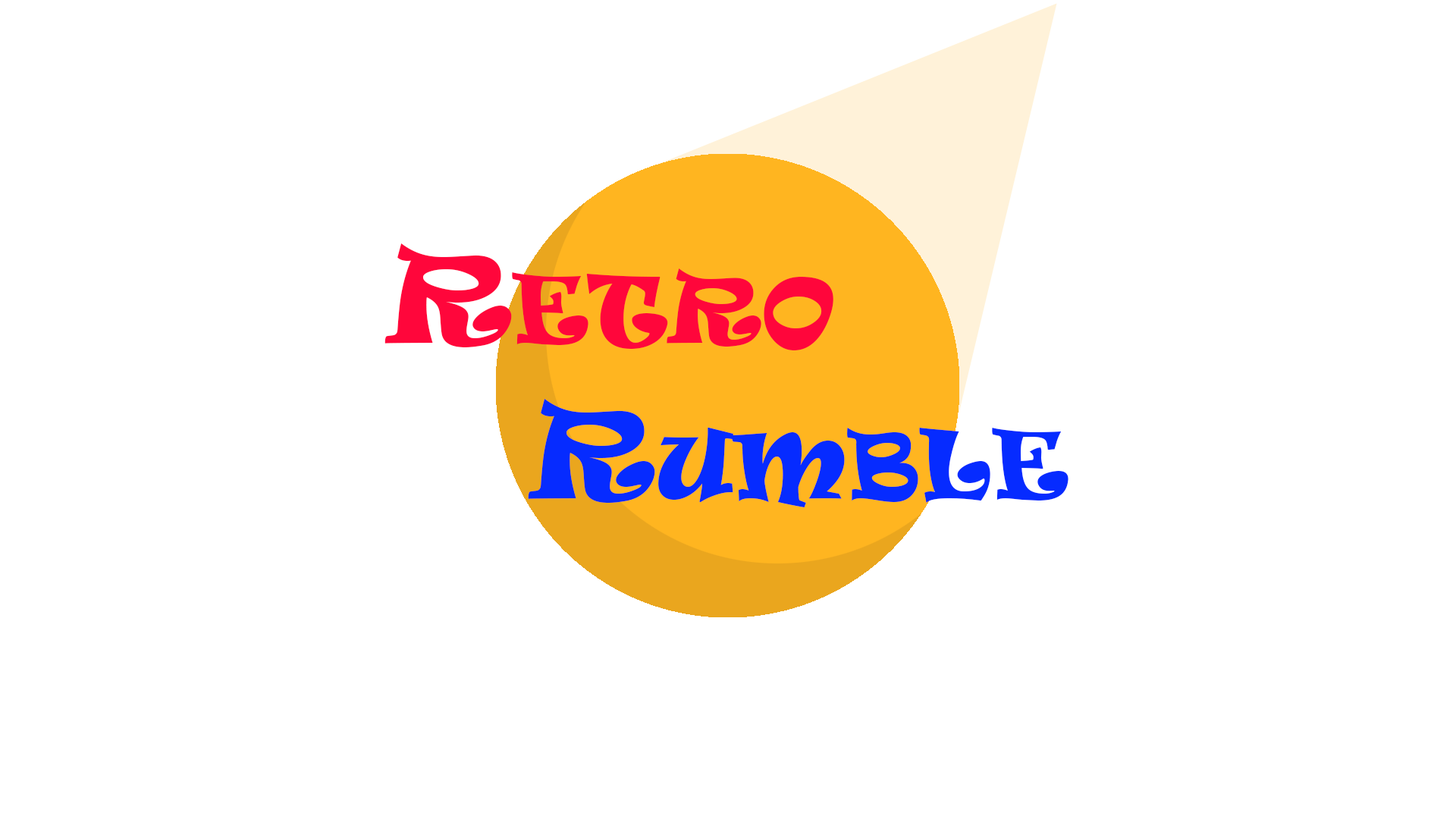
<style>
.page{position:relative;width:1456px;height:819px;background:#ffffff}
.page>*{position:absolute;margin:0}
.t1{font:89.5px "Ravie";color:#ff063b}
.t2{font:119.8px "Ravie";color:#ff063b}
.t3{font:89.5px "Ravie";color:#062bff}
.t4{font:119.8px "Ravie";color:#062bff}
</style>
<div class="page">
<p class="t1" style="left:384px;top:243px;width:449px;height:107px"><span class="t2">R</span>ETRO</p>
<p class="t3" style="left:528px;top:399px;width:540px;height:108px"><span class="t4">R</span>UMBLE</p>
</div>
